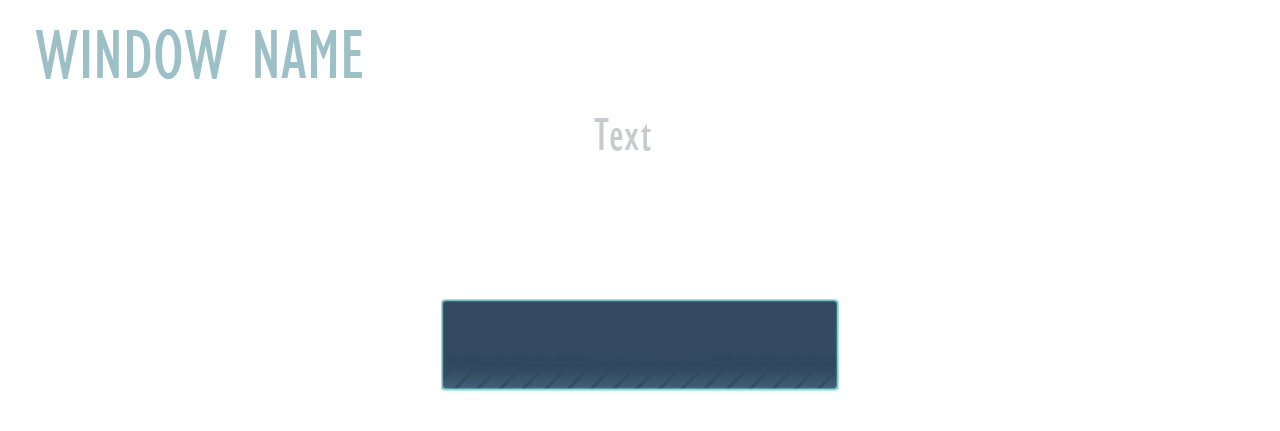
<style>
.page{position:relative;width:1280px;height:431px;background:#ffffff}
.page>*{position:absolute;margin:0}
.t1{font:72px "GillSansMT-Condensed";color:#9cc0c6}
.t2{font:48px "GillSansMT-Condensed";color:#c6cccd}
</style>
<div class="page">
<p class="t1" style="left:35px;top:29px;width:327px;height:50px">WINDOW NAME</p>
<p class="t2" style="left:594px;top:118px;width:57px;height:33px">Text</p>
</div>
